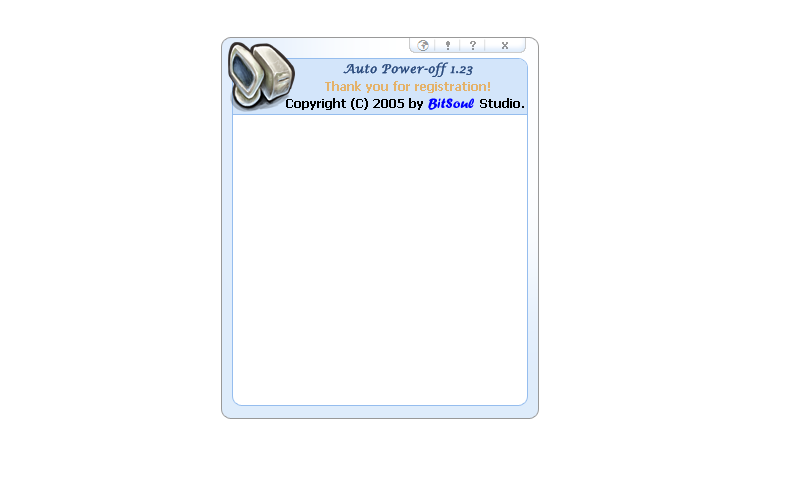
<style>
.page{position:relative;width:800px;height:480px;background:#ffffff}
.page>*{position:absolute;margin:0}
.t1{font:12px "LucidaCalligraphy-Italic";color:#29497c;font-weight:bold}
.t2{font:12px "Tahoma-Bold";color:#e4b26a}
.t3{font:12px "Tahoma-Bold";color:#000000}
.t4{font:14px "ForteMT";color:#0000ff}
</style>
<div class="page">
<p class="t1" style="left:343px;top:62px;width:130px;height:15px">Auto Power-off 1.23</p>
<p class="t2" style="left:325px;top:81px;width:165px;height:12px">Thank you for registration!</p>
<p class="t3" style="left:286px;top:98px;width:238px;height:12px">Copyright (C) 2005 by              Studio.</p>
<p class="t4" style="left:428px;top:98px;width:46px;height:12px">BitSoul</p>
</div>
